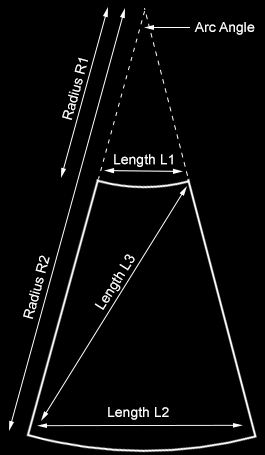
<style>
.page{position:relative;width:265px;height:455px;background:#000000}
.page>*{position:absolute;margin:0}
.t1{font:14px "ArialMT";color:#ffffff}
.t2{font:14.2px "ArialMT";color:#ffffff}
</style>
<div class="page">
<p class="t1" style="left:194px;top:22px;width:61px;height:13px">Arc Angle</p>
<p class="t1" style="left:62px;top:57px;width:26px;height:63px;rotate:-75deg">Radius R1</p>
<p class="t1" style="left:114px;top:154px;width:59px;height:13px">Length L1</p>
<p class="t1" style="left:23px;top:255px;width:27px;height:64px;rotate:-75deg">Radius R2</p>
<p class="t2" style="left:94px;top:254px;width:41px;height:56px;rotate:-58deg">Length L3</p>
<p class="t1" style="left:108px;top:407px;width:61px;height:13px">Length L2</p>
</div>
